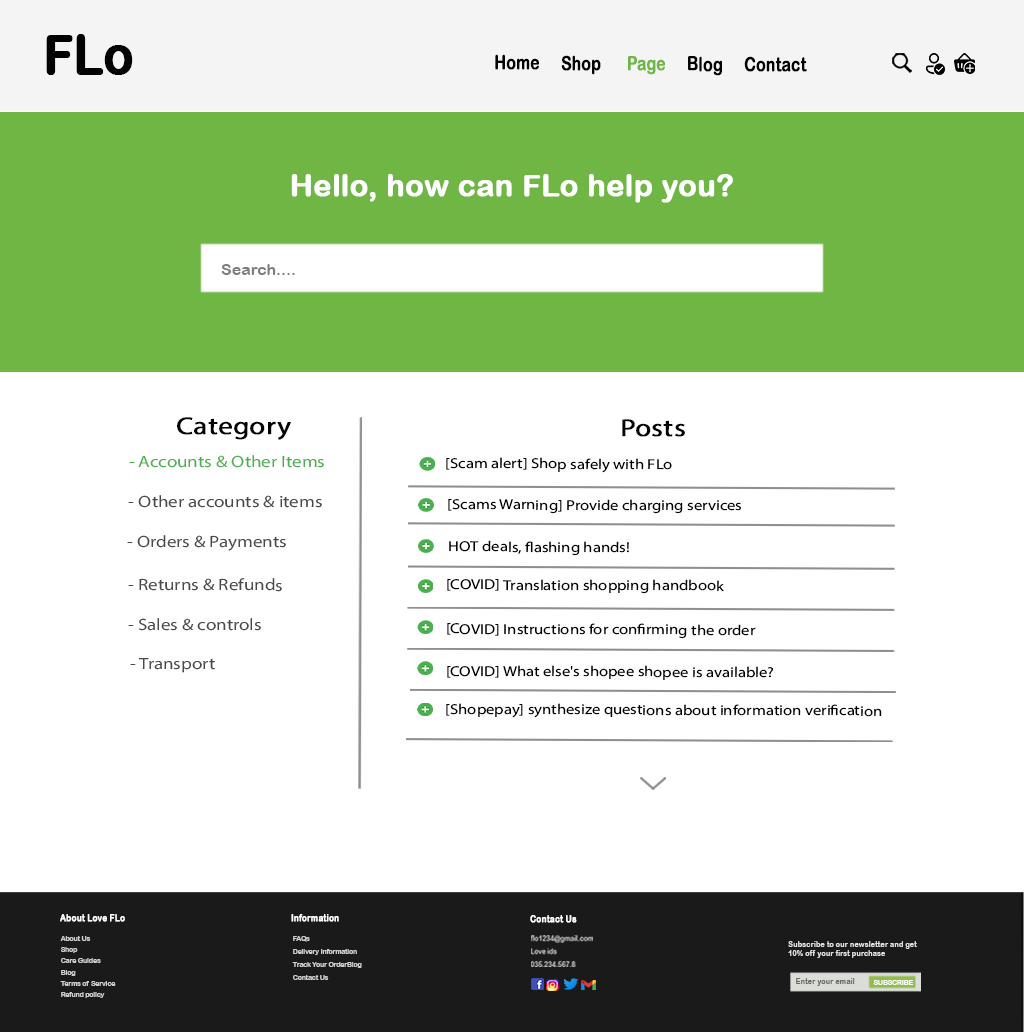
<style>
.page{position:relative;width:1024px;height:1032px;background:#ffffff}
.page>*{position:absolute;margin:0}
.t1{font:54.6px "ArialRoundedMTBold";color:#020202;font-weight:bold;scale:0.9 1}
.t2{font:19.5px "ArialRoundedMTBold";color:#020202;font-weight:bold;scale:0.79 1}
.t3{font:19.5px "ArialRoundedMTBold";color:#000000;font-weight:bold;scale:0.79 1}
.t4{font:19.5px "ArialRoundedMTBold";color:#6fb644;font-weight:bold;scale:0.79 1}
.t5{font:30px "ArialRoundedMTBold";color:#ffffff;font-weight:bold}
.t6{font:16px "ArialRoundedMTBold";color:#7e7e7e}
.t7{font:24.7px "MyriadPro-Regular";color:#030303;font-weight:bold;scale:1.15 1}
.t8{font:16.4px "MyriadPro-Regular";color:#4caf50;scale:1.15 1}
.t9{font:14.4px "MyriadPro-Regular";color:#000000;scale:1.15 1}
.t10{font:16.4px "MyriadPro-Regular";color:#494949;scale:1.15 1}
.t11{font:9.1px "ArialRoundedMTBold";color:#ffffff;font-weight:bold;scale:0.91 1}
.t12{font:7.3px/11.3px "ArialRoundedMTBold";color:#cecece;scale:0.91 1}
.t13{font:7.2px/13px "ArialRoundedMTBold";color:#cecece;scale:0.91 1}
.t14{font:8.2px "ArialRoundedMTBold";color:#e2e2e2;scale:0.91 1}
.t15{font:8.2px "ArialRoundedMTBold";color:#686967;scale:0.91 1}
.t16{font:7.3px "ArialRoundedMTBold";color:#ffffff;scale:0.91 1}
</style>
<div class="page">
<p class="t1" style="left:46px;top:34px;width:87px;height:41px">FLo</p>
<p class="t2" style="left:495px;top:54px;width:312px;height:22px"><span class="t3">Home </span>    Shop      <span class="t4">Page  </span>   Blog     Contact</p>
<p class="t5" style="left:291px;top:174px;width:442px;height:29px">Hello, how can FLo help you?</p>
<p class="t6" style="left:221px;top:264px;width:74px;height:11px">Search....</p>
<p class="t7" style="left:177px;top:417px;width:114px;height:23px">Category</p>
<p class="t7" style="left:622px;top:419px;width:63px;height:18px">Posts</p>
<p class="t8" style="left:129px;top:455px;width:195px;height:13px">- Accounts &amp; Other Items</p>
<p class="t9" style="left:446px;top:457px;width:226px;height:16px">[Scam alert] Shop safely with FLo</p>
<p class="t10" style="left:128px;top:495px;width:194px;height:13px">- Other accounts &amp; items</p>
<p class="t9" style="left:448px;top:499px;width:293px;height:15px">[Scams Warning] Provide charging services</p>
<p class="t10" style="left:127px;top:535px;width:159px;height:16px">- Orders &amp; Payments</p>
<p class="t9" style="left:449px;top:540px;width:180px;height:16px">HOT deals, flashing hands!</p>
<p class="t10" style="left:128px;top:578px;width:154px;height:14px">- Returns &amp; Refunds</p>
<p class="t9" style="left:447px;top:579px;width:277px;height:15px">[COVID] Translation shopping handbook</p>
<p class="t10" style="left:128px;top:618px;width:133px;height:13px">- Sales &amp; controls</p>
<p class="t9" style="left:447px;top:623px;width:309px;height:16px">[COVID] Instructions for confirming the order</p>
<p class="t10" style="left:130px;top:658px;width:85px;height:15px">- Transport</p>
<p class="t9" style="left:447px;top:665px;width:327px;height:15px">[COVID] What else's shopee shopee is available?</p>
<p class="t9" style="left:446px;top:703px;width:436px;height:15px">[Shopepay] synthesize questions about information verification</p>
<p class="t11" style="left:60px;top:914px;width:65px;height:8px">About Love FLo</p>
<p class="t11" style="left:291px;top:914px;width:48px;height:8px">Information</p>
<p class="t11" style="left:530px;top:915px;width:47px;height:8px">Contact Us</p>
<p class="t12" style="left:60px;top:936px;width:56px;height:62px">About Us<br>Shop<br>Care Guides<br>Blog<br>Terms of Service<br>Refund policy</p>
<p class="t13" style="left:292px;top:936px;width:70px;height:44px">FAQs<br>Delivery Information<br>Track Your OrderBlog<br>Contact Us</p>
<p class="t14" style="left:788px;top:941px;width:129px;height:17px">Subscribe to our newsletter and get<br>10% off your first purchase</p>
<p class="t15" style="left:796px;top:978px;width:59px;height:8px">Enter your email</p>
<p class="t16" style="left:873px;top:980px;width:40px;height:5px">SUBSCRIBE</p>
</div>
